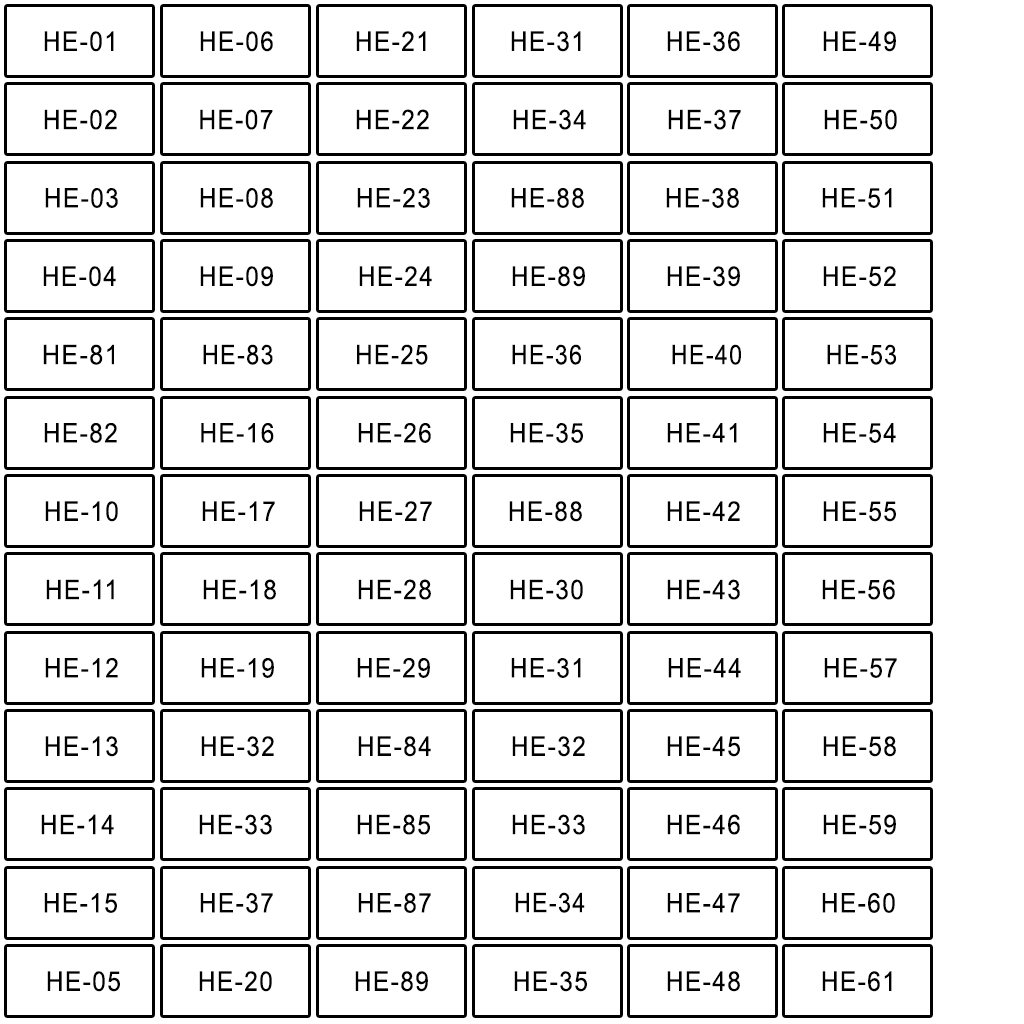
<style>
.page{position:relative;width:1024px;height:1024px;background:#ffffff}
.page>*{position:absolute;margin:0}
.t1{font:46.3px "ArialMT";letter-spacing:0.06em;color:#000000;scale:0.9 1}
.t2{font:46.4px "ArialMT";letter-spacing:0.06em;color:#000000;scale:0.92 1}
.t3{font:46.4px "ArialMT";letter-spacing:0.06em;color:#000000;scale:0.86 1}
.t4{font:46.4px "ArialMT";letter-spacing:0.06em;color:#000000;scale:0.88 1}
</style>
<div class="page">
<p class="t1" style="left:44px;top:31px;width:70px;height:21px">HE-01</p>
<p class="t1" style="left:200px;top:31px;width:73px;height:21px">HE-06</p>
<p class="t1" style="left:356px;top:31px;width:70px;height:20px">HE-21</p>
<p class="t1" style="left:511px;top:31px;width:70px;height:21px">HE-31</p>
<p class="t1" style="left:667px;top:31px;width:73px;height:21px">HE-36</p>
<p class="t1" style="left:823px;top:31px;width:73px;height:21px">HE-49</p>
<p class="t1" style="left:44px;top:109px;width:73px;height:21px">HE-02</p>
<p class="t1" style="left:200px;top:109px;width:73px;height:21px">HE-07</p>
<p class="t1" style="left:356px;top:109px;width:73px;height:21px">HE-22</p>
<p class="t1" style="left:513px;top:109px;width:73px;height:21px">HE-34</p>
<p class="t1" style="left:668px;top:109px;width:73px;height:21px">HE-37</p>
<p class="t1" style="left:824px;top:109px;width:73px;height:21px">HE-50</p>
<p class="t1" style="left:45px;top:188px;width:73px;height:20px">HE-03</p>
<p class="t1" style="left:200px;top:188px;width:73px;height:20px">HE-08</p>
<p class="t1" style="left:357px;top:188px;width:73px;height:20px">HE-23</p>
<p class="t1" style="left:511px;top:188px;width:73px;height:20px">HE-88</p>
<p class="t1" style="left:666px;top:188px;width:73px;height:20px">HE-38</p>
<p class="t1" style="left:822px;top:188px;width:70px;height:20px">HE-51</p>
<p class="t1" style="left:43px;top:266px;width:73px;height:21px">HE-04</p>
<p class="t1" style="left:200px;top:266px;width:73px;height:21px">HE-09</p>
<p class="t1" style="left:359px;top:266px;width:73px;height:20px">HE-24</p>
<p class="t1" style="left:512px;top:266px;width:73px;height:21px">HE-89</p>
<p class="t1" style="left:667px;top:266px;width:73px;height:21px">HE-39</p>
<p class="t1" style="left:823px;top:266px;width:73px;height:21px">HE-52</p>
<p class="t2" style="left:43px;top:344px;width:71px;height:21px">HE-81</p>
<p class="t3" style="left:203px;top:344px;width:70px;height:21px">HE-83</p>
<p class="t4" style="left:357px;top:344px;width:71px;height:21px">HE-25</p>
<p class="t3" style="left:512px;top:344px;width:69px;height:21px">HE-36</p>
<p class="t3" style="left:672px;top:344px;width:69px;height:21px">HE-40</p>
<p class="t3" style="left:827px;top:344px;width:69px;height:21px">HE-53</p>
<p class="t1" style="left:44px;top:423px;width:73px;height:20px">HE-82</p>
<p class="t1" style="left:201px;top:423px;width:73px;height:20px">HE-16</p>
<p class="t1" style="left:358px;top:423px;width:73px;height:20px">HE-26</p>
<p class="t1" style="left:510px;top:423px;width:73px;height:20px">HE-35</p>
<p class="t1" style="left:667px;top:423px;width:70px;height:20px">HE-41</p>
<p class="t1" style="left:823px;top:423px;width:73px;height:20px">HE-54</p>
<p class="t1" style="left:45px;top:501px;width:73px;height:21px">HE-10</p>
<p class="t1" style="left:202px;top:501px;width:73px;height:20px">HE-17</p>
<p class="t1" style="left:359px;top:501px;width:73px;height:20px">HE-27</p>
<p class="t1" style="left:509px;top:501px;width:73px;height:21px">HE-88</p>
<p class="t1" style="left:667px;top:501px;width:73px;height:20px">HE-42</p>
<p class="t1" style="left:823px;top:501px;width:73px;height:21px">HE-55</p>
<p class="t1" style="left:46px;top:579px;width:68px;height:21px">HE-11</p>
<p class="t1" style="left:203px;top:579px;width:73px;height:21px">HE-18</p>
<p class="t1" style="left:358px;top:579px;width:73px;height:21px">HE-28</p>
<p class="t1" style="left:510px;top:579px;width:73px;height:21px">HE-30</p>
<p class="t1" style="left:667px;top:579px;width:73px;height:21px">HE-43</p>
<p class="t1" style="left:822px;top:579px;width:73px;height:21px">HE-56</p>
<p class="t1" style="left:45px;top:658px;width:73px;height:20px">HE-12</p>
<p class="t1" style="left:201px;top:658px;width:73px;height:20px">HE-19</p>
<p class="t1" style="left:357px;top:658px;width:73px;height:20px">HE-29</p>
<p class="t1" style="left:511px;top:658px;width:70px;height:20px">HE-31</p>
<p class="t1" style="left:668px;top:658px;width:73px;height:20px">HE-44</p>
<p class="t1" style="left:824px;top:658px;width:73px;height:20px">HE-57</p>
<p class="t1" style="left:45px;top:736px;width:73px;height:21px">HE-13</p>
<p class="t1" style="left:201px;top:736px;width:73px;height:21px">HE-32</p>
<p class="t1" style="left:358px;top:736px;width:73px;height:21px">HE-84</p>
<p class="t1" style="left:512px;top:736px;width:73px;height:21px">HE-32</p>
<p class="t1" style="left:667px;top:736px;width:73px;height:21px">HE-45</p>
<p class="t1" style="left:823px;top:736px;width:73px;height:21px">HE-58</p>
<p class="t1" style="left:41px;top:814px;width:73px;height:21px">HE-14</p>
<p class="t1" style="left:199px;top:814px;width:73px;height:21px">HE-33</p>
<p class="t1" style="left:357px;top:814px;width:73px;height:21px">HE-85</p>
<p class="t1" style="left:512px;top:814px;width:73px;height:21px">HE-33</p>
<p class="t1" style="left:667px;top:814px;width:73px;height:21px">HE-46</p>
<p class="t1" style="left:823px;top:814px;width:73px;height:21px">HE-59</p>
<p class="t1" style="left:44px;top:893px;width:73px;height:20px">HE-15</p>
<p class="t1" style="left:200px;top:893px;width:73px;height:20px">HE-37</p>
<p class="t1" style="left:358px;top:893px;width:73px;height:20px">HE-87</p>
<p class="t3" style="left:515px;top:892px;width:70px;height:21px">HE-34</p>
<p class="t1" style="left:667px;top:893px;width:73px;height:20px">HE-47</p>
<p class="t1" style="left:822px;top:893px;width:73px;height:20px">HE-60</p>
<p class="t1" style="left:47px;top:971px;width:73px;height:21px">HE-05</p>
<p class="t1" style="left:199px;top:971px;width:73px;height:21px">HE-20</p>
<p class="t1" style="left:355px;top:971px;width:73px;height:21px">HE-89</p>
<p class="t1" style="left:514px;top:971px;width:73px;height:21px">HE-35</p>
<p class="t1" style="left:667px;top:971px;width:73px;height:21px">HE-48</p>
<p class="t1" style="left:822px;top:971px;width:70px;height:21px">HE-61</p>
</div>
